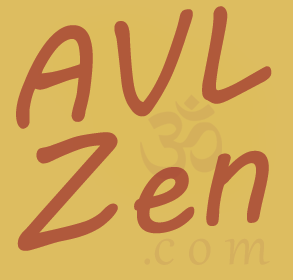
<style>
.page{position:relative;width:293px;height:280px;background:#ddbd60}
.page>*{position:absolute;margin:0}
.t1{font:136.1px "MVBoli";color:#b0593a}
.t2{font:143.5px "MVBoli";color:#b0593c}
.t3{font:71.6px "Gabriola";color:#d5b05e}
</style>
<div class="page">
<p class="t1" style="left:16px;top:6px;width:256px;height:123px;rotate:-7deg">AVL</p>
<p class="t2" style="left:17px;top:132px;width:252px;height:119px;rotate:-7deg">Zen</p>
<p class="t3" style="left:144px;top:238px;width:126px;height:27px">.c o m</p>
</div>
